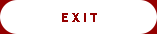
<style>
.page{position:relative;width:157px;height:34px;background:#ffffff}
.page>*{position:absolute;margin:0}
.t1{font:14.1px "WorkSansRoman-Bold";letter-spacing:0.3em;color:#940000;scale:0.82 1}
</style>
<div class="page">
<p class="t1" style="left:62px;top:13px;width:35px;height:9px">EXIT</p>
</div>
